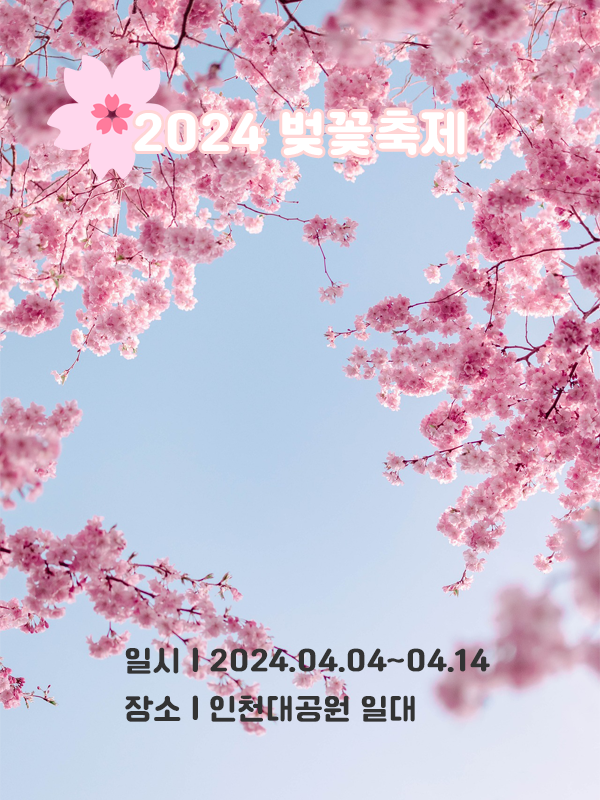
<style>
.page{position:relative;width:600px;height:800px}
.page>*{position:absolute;margin:0}
.t1{font:50px "Cafe24Ssurround";color:#ffffff}
.t2{font:30px "Cafe24Ssurround";color:#333333}
</style>
<div class="page">
<p class="t1" style="left:134px;top:110px;width:331px;height:46px">2024 벚꽃축제</p>
<p class="t2" style="left:125px;top:647px;width:365px;height:27px">일시 | 2024.04.04~04.14</p>
<p class="t2" style="left:125px;top:695px;width:290px;height:27px">장소 | 인천대공원 일대</p>
</div>
